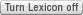
<style>
.page{position:relative;width:83px;height:15px}
.page>*{position:absolute;margin:0}
.t1{font:11px "HelveticaNeue-Condensed";letter-spacing:0.05em;color:#555555}
</style>
<div class="page">
<p class="t1" style="left:5px;top:3px;width:74px;height:8px">Turn Lexicon off</p>
</div>
